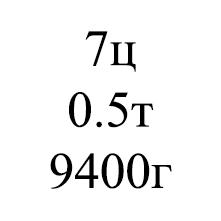
<style>
.page{position:relative;width:221px;height:221px;background:#ffffff}
.page>*{position:absolute;margin:0}
.t1{font:51.1px "TimesNewRomanPSMT";color:#000000}
</style>
<div class="page">
<p class="t1" style="left:50px;top:31px;width:122px;height:158px;text-align:center">7ц<br>0.5т<br>9400г</p>
</div>
